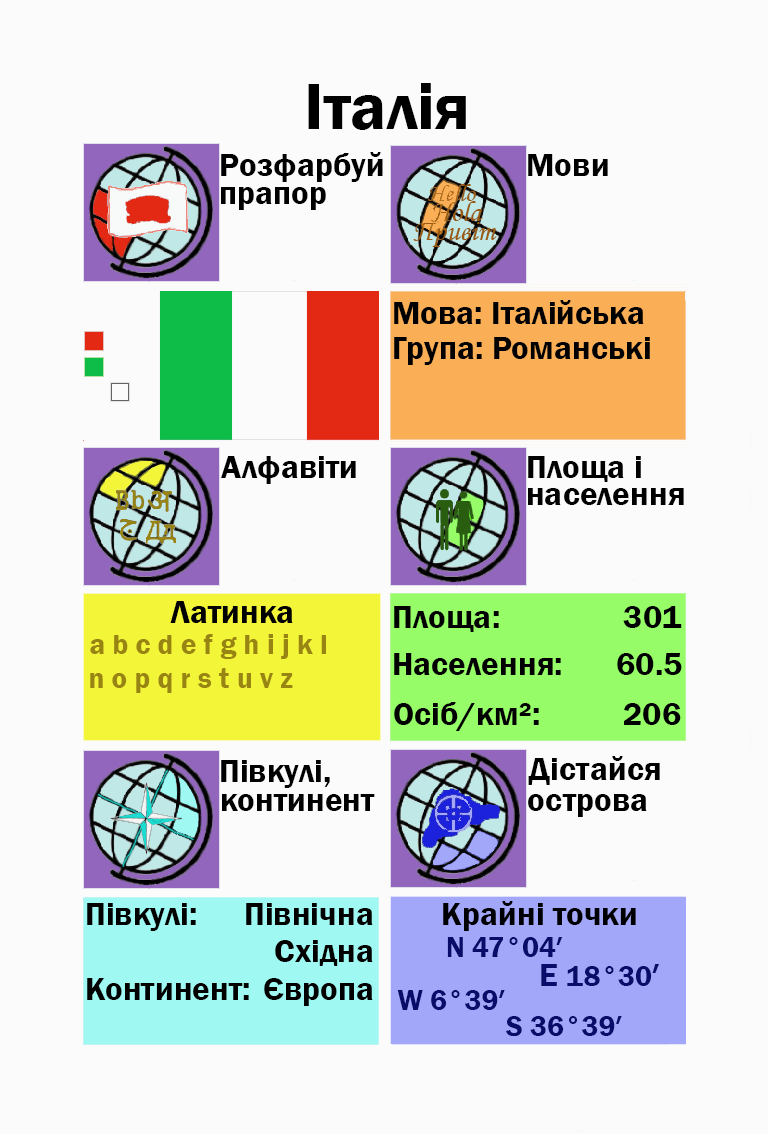
<style>
.page{position:relative;width:768px;height:1134px;background:#fbfbfb}
.page>*{position:absolute;margin:0}
.t1{font:66.7px "FranklinGothic-Demi";color:#000000}
.t2{font:33.3px "FranklinGothic-Demi";color:#000000}
.t3{font:33.3px "FranklinGothic-Demi";color:#000003}
.t4{font:29.2px "FranklinGothic-Demi";color:#988413}
.t5{font:29.2px "FranklinGothic-Demi";color:#090c69}
.t6{font:33.3px "FranklinGothic-Demi";color:#090c69}
</style>
<div class="page">
<p class="t1" style="left:308px;top:83px;width:158px;height:47px">Італія</p>
<p class="t2" style="left:221px;top:152px;width:162px;height:30px">Розфарбуй</p>
<p class="t2" style="left:528px;top:154px;width:80px;height:22px">Мови</p>
<p class="t2" style="left:221px;top:187px;width:105px;height:23px">прапор</p>
<p class="t2" style="left:394px;top:300px;width:250px;height:24px">Мова: Італійська</p>
<p class="t2" style="left:394px;top:337px;width:256px;height:28px">Група: Романські</p>
<p class="t2" style="left:221px;top:456px;width:135px;height:28px">Алфавіти</p>
<p class="t2" style="left:528px;top:456px;width:113px;height:26px">Площа і</p>
<p class="t2" style="left:528px;top:488px;width:156px;height:17px">населення</p>
<p class="t2" style="left:170px;top:601px;width:123px;height:22px">Латинка</p>
<p class="t2" style="left:394px;top:606px;width:105px;height:26px">Площа:</p>
<p class="t3" style="left:623px;top:606px;width:59px;height:22px">301</p>
<p class="t4" style="left:90px;top:634px;width:236px;height:25px">a b c d e f g h i j k l</p>
<p class="t2" style="left:394px;top:653px;width:167px;height:22px">Населення:</p>
<p class="t2" style="left:617px;top:653px;width:65px;height:22px">60.5</p>
<p class="t4" style="left:90px;top:668px;width:203px;height:25px">n o p q r s t u v z</p>
<p class="t2" style="left:394px;top:702px;width:145px;height:29px">Осіб/км²:</p>
<p class="t2" style="left:624px;top:703px;width:57px;height:22px">206</p>
<p class="t2" style="left:221px;top:760px;width:109px;height:28px">Півкулі,</p>
<p class="t2" style="left:528px;top:756px;width:132px;height:29px">Дістайся</p>
<p class="t2" style="left:222px;top:794px;width:153px;height:17px">континент</p>
<p class="t2" style="left:528px;top:794px;width:119px;height:23px">острова</p>
<p class="t2" style="left:87px;top:903px;width:109px;height:28px">Півкулі:</p>
<p class="t2" style="left:246px;top:903px;width:127px;height:22px">Північна</p>
<p class="t3" style="left:443px;top:901px;width:193px;height:30px">Крайні точки</p>
<p class="t2" style="left:275px;top:940px;width:98px;height:26px">Східна</p>
<p class="t5" style="left:447px;top:937px;width:116px;height:20px">N 47°04′</p>
<p class="t5" style="left:541px;top:964px;width:118px;height:22px"><span class="t6">E </span>18°30<span class="t6">′</span></p>
<p class="t2" style="left:87px;top:978px;width:162px;height:22px">Континент:</p>
<p class="t2" style="left:264px;top:978px;width:109px;height:28px">Європа</p>
<p class="t5" style="left:397px;top:990px;width:108px;height:20px">W 6°39′</p>
<p class="t5" style="left:506px;top:1016px;width:116px;height:21px">S 36°39′</p>
</div>
